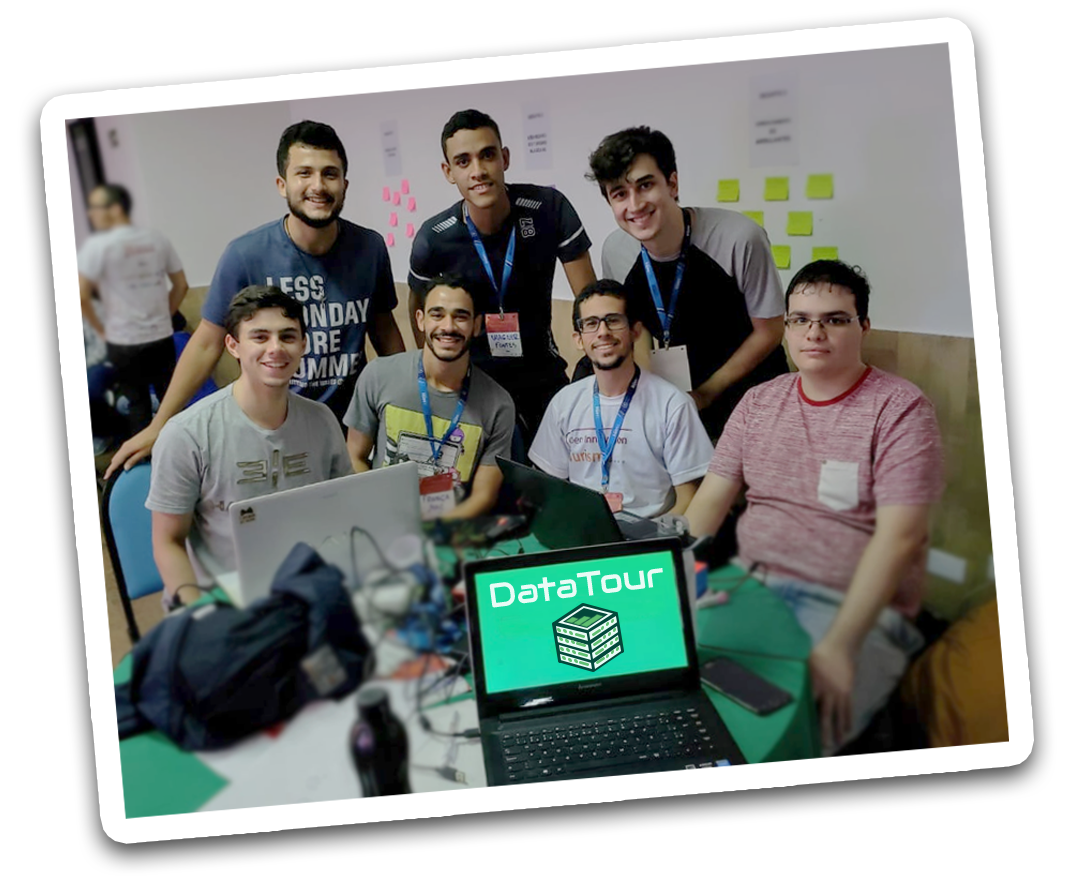
<style>
.page{position:relative;width:1078px;height:878px;background:#ffffff}
.page>*{position:absolute;margin:0}
.t1{font:34.1px "Audiowide-Regular";letter-spacing:-0.01em;color:#ffffff}
</style>
<div class="page">
<p class="t1" style="left:489px;top:568px;width:174px;height:40px;rotate:-7deg">DataTour</p>
</div>
